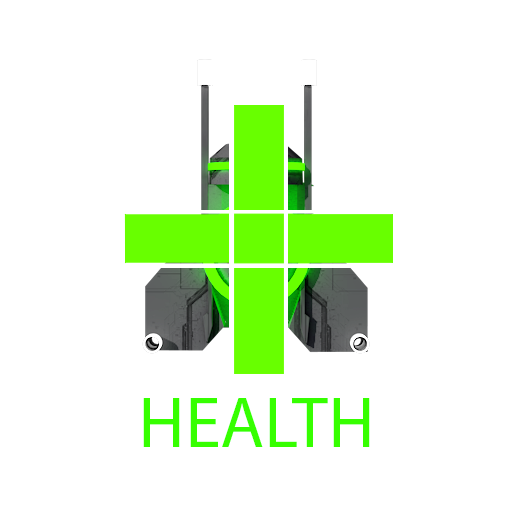
<style>
.page{position:relative;width:512px;height:512px;background:#ffffff}
.page>*{position:absolute;margin:0}
.t1{font:72px "MyriadPro-Regular";color:#36ff00}
</style>
<div class="page">
<p class="t1" style="left:143px;top:398px;width:227px;height:49px">HEALTH</p>
</div>
